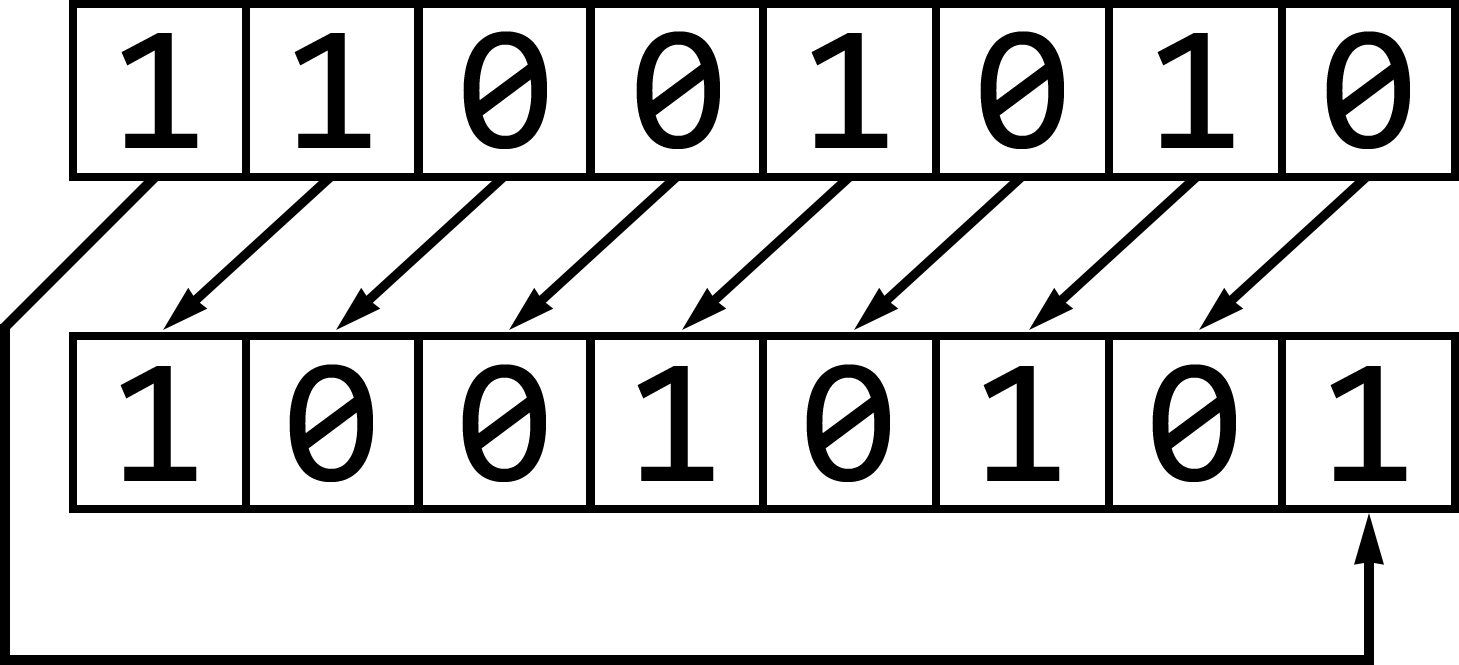
<style>
.page{position:relative;width:1459px;height:665px;background:#ffffff}
.page>*{position:absolute;margin:0}
.t1{font:179.2px "Consolas";color:#000000}
</style>
<div class="page">
<p class="t1" style="left:121px;top:33px;width:77px;height:115px">1</p>
<p class="t1" style="left:294px;top:33px;width:77px;height:115px">1</p>
<p class="t1" style="left:463px;top:31px;width:84px;height:118px">0</p>
<p class="t1" style="left:636px;top:31px;width:84px;height:118px">0</p>
<p class="t1" style="left:811px;top:33px;width:77px;height:115px">1</p>
<p class="t1" style="left:980px;top:31px;width:84px;height:118px">0</p>
<p class="t1" style="left:1157px;top:33px;width:77px;height:115px">1</p>
<p class="t1" style="left:1326px;top:31px;width:84px;height:118px">0</p>
<p class="t1" style="left:120px;top:366px;width:77px;height:115px">1</p>
<p class="t1" style="left:289px;top:364px;width:84px;height:118px">0</p>
<p class="t1" style="left:462px;top:364px;width:84px;height:118px">0</p>
<p class="t1" style="left:637px;top:366px;width:77px;height:115px">1</p>
<p class="t1" style="left:806px;top:364px;width:84px;height:118px">0</p>
<p class="t1" style="left:983px;top:366px;width:77px;height:115px">1</p>
<p class="t1" style="left:1152px;top:364px;width:84px;height:118px">0</p>
<p class="t1" style="left:1330px;top:366px;width:77px;height:115px">1</p>
</div>
